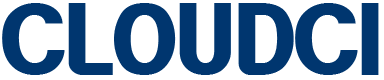
<style>
.page{position:relative;width:384px;height:80px;background:#ffffff}
.page>*{position:absolute;margin:0}
.t1{font:82px "HeadlineR-HM";letter-spacing:-0.075em;color:#00366f;text-transform:uppercase}
</style>
<div class="page">
<p class="t1" style="left:2px;top:3px;width:377px;height:72px">CloudCI</p>
</div>
